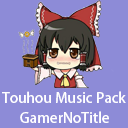
<style>
.page{position:relative;width:128px;height:128px;background:#8d8bd7}
.page>*{position:absolute;margin:0}
.t1{font:14.2px "AdobeHeitiStd-Regular";color:#ffffff}
</style>
<div class="page">
<p class="t1" style="left:2px;top:91px;width:124px;height:12px">Touhou Music Pack</p>
<p class="t1" style="left:20px;top:111px;width:89px;height:12px">GamerNoTitle</p>
</div>
